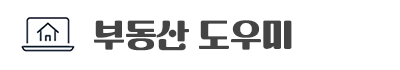
<style>
.page{position:relative;width:400px;height:70px;background:#ffffff}
.page>*{position:absolute;margin:0}
.t1{font:32px "TTSantoriniB";color:#444444}
</style>
<div class="page">
<p class="t1" style="left:94px;top:20px;width:198px;height:31px">부동산 도우미</p>
</div>
